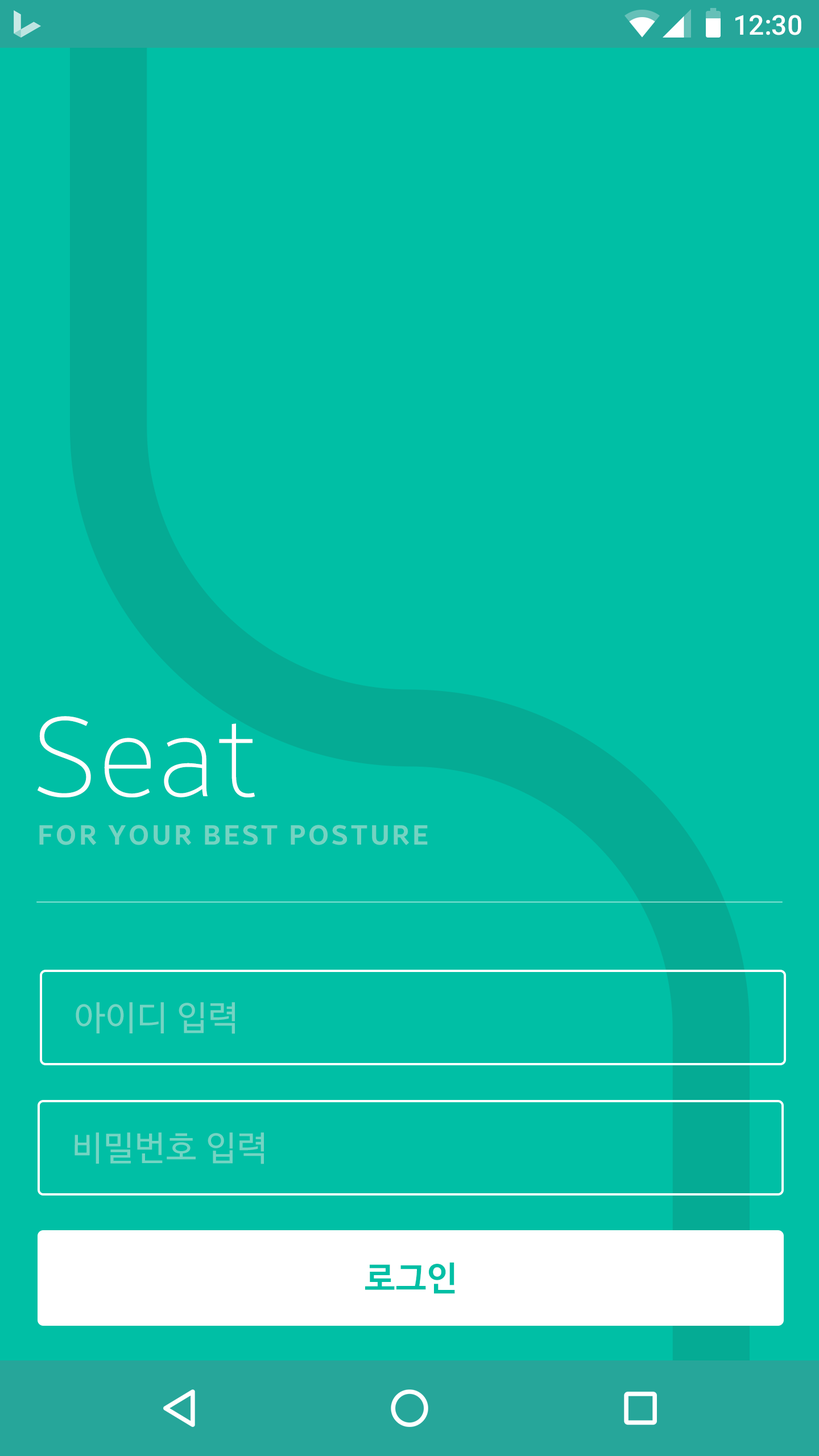
<style>
.page{position:relative;width:819px;height:1456px;background:#00bfa5}
.page>*{position:absolute;margin:0}
.t1{font:27.3px "Roboto-Medium";color:#ffffff}
.t2{font:111.5px "BreezeSans-Thin";letter-spacing:0.025em;color:#fffefe}
.t3{font:27.3px "BreezeSans-Bold";letter-spacing:0.1em;color:#74d3c2}
.t4{font:34.1px "NanumBarunGothic";letter-spacing:0.025em;color:#74d4c3}
.t5{font:34.1px "NanumBarunGothicBold";letter-spacing:0.025em;color:#00bfa5}
</style>
<div class="page">
<p class="t1" style="left:735px;top:15px;width:66px;height:20px">12:30</p>
<p class="t2" style="left:38px;top:716px;width:217px;height:81px">Seat</p>
<p class="t3" style="left:39px;top:825px;width:389px;height:20px">FOR YOUR BEST POSTURE</p>
<p class="t4" style="left:76px;top:1002px;width:159px;height:32px">아이디 입력</p>
<p class="t4" style="left:75px;top:1132px;width:189px;height:32px">비밀번호 입력</p>
<p class="t5" style="left:365px;top:1262px;width:90px;height:32px">로그인</p>
</div>
